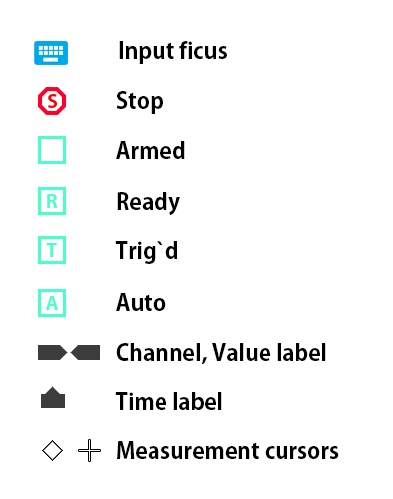
<style>
.page{position:relative;width:393px;height:499px;background:#ffffff}
.page>*{position:absolute;margin:0}
.t1{font:22.5px "AdobeGothicStd-Bold";color:#000000}
</style>
<div class="page">
<p class="t1" style="left:119px;top:41px;width:108px;height:23px">Input ficus</p>
<p class="t1" style="left:116px;top:91px;width:47px;height:23px">Stop</p>
<p class="t1" style="left:116px;top:141px;width:69px;height:18px">Armed</p>
<p class="t1" style="left:117px;top:192px;width:63px;height:24px">Ready</p>
<p class="t1" style="left:115px;top:241px;width:62px;height:23px">Trig`d</p>
<p class="t1" style="left:116px;top:293px;width:50px;height:18px">Auto</p>
<p class="t1" style="left:116px;top:343px;width:210px;height:21px">Channel, Value label</p>
<p class="t1" style="left:115px;top:392px;width:107px;height:18px">Time label</p>
<p class="t1" style="left:117px;top:441px;width:222px;height:18px">Measurement cursors</p>
</div>
